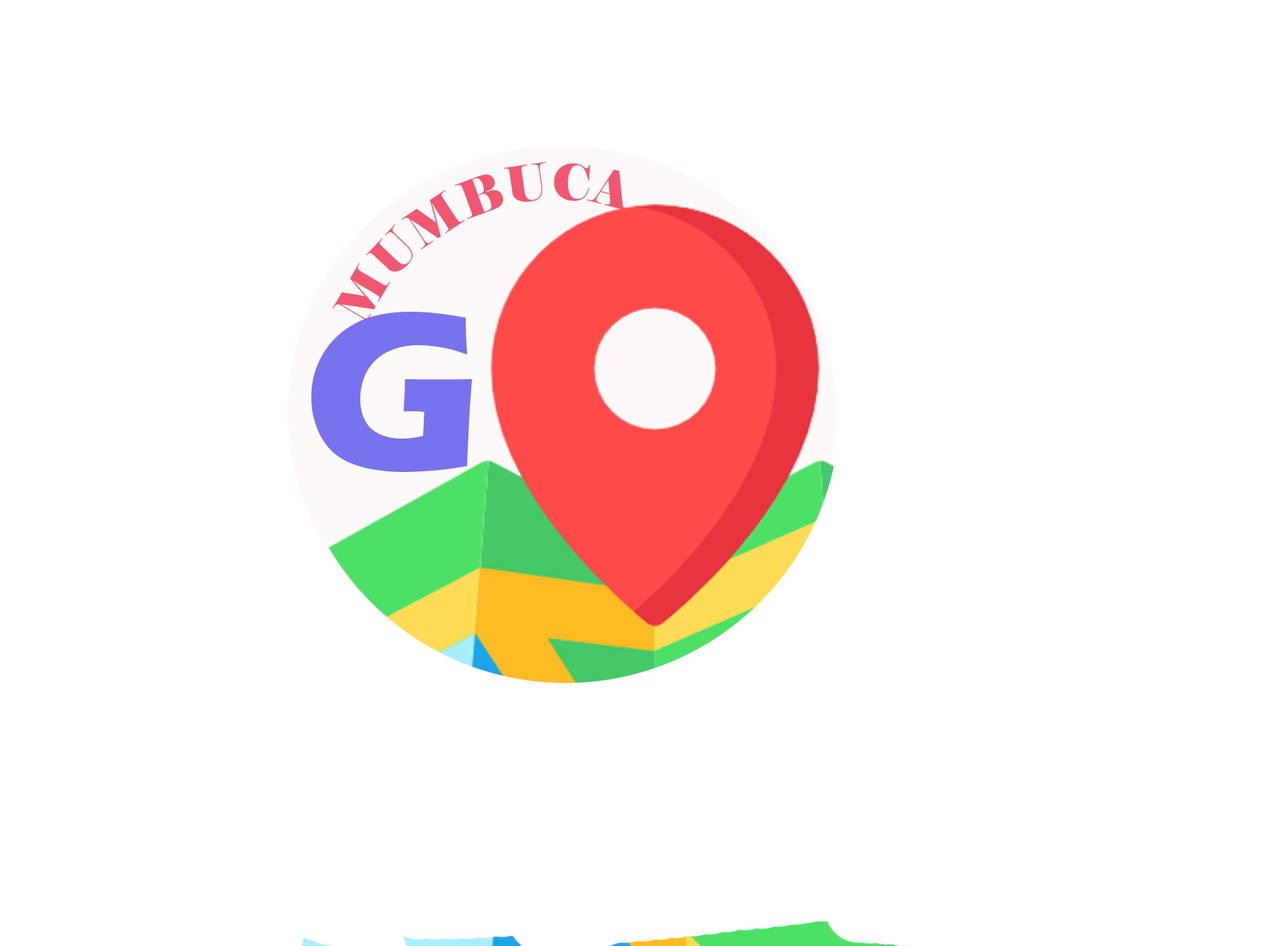
<style>
.page{position:relative;width:1261px;height:946px;background:#ffffff}
.page>*{position:absolute;margin:0}
.t1{font:50px "Elephant-Regular";color:#f15771}
.t2{font:231.4px "ErasITC-Bold";color:#7872ee}
</style>
<div class="page">
<p class="t1" style="left:332px;top:161px;width:296px;height:166px;rotate:-67deg">MUMBUCA</p>
<p class="t2" style="left:311px;top:312px;width:161px;height:160px">G</p>
</div>
